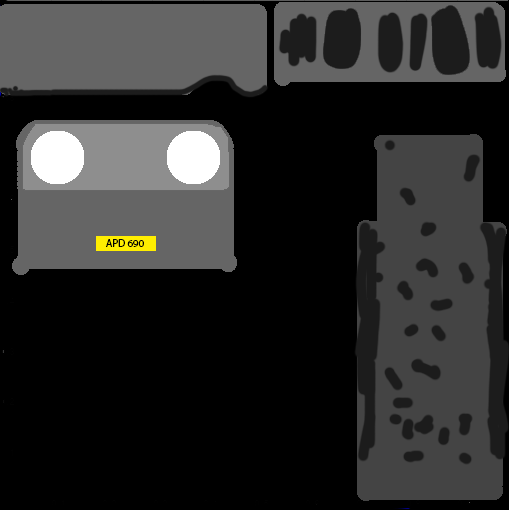
<style>
.page{position:relative;width:509px;height:510px;background:#000000}
.page>*{position:absolute;margin:0}
.t1{font:10.7px "MyriadPro-Regular";color:#000000}
</style>
<div class="page">
<p class="t1" style="left:106px;top:239px;width:38px;height:8px">APD 690</p>
</div>
